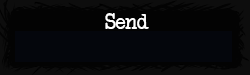
<style>
.page{position:relative;width:250px;height:75px;background:#04060c}
.page>*{position:absolute;margin:0}
.t1{font:20.8px "AnotherTypewriter";color:#ffffff}
</style>
<div class="page">
<p class="t1" style="left:105px;top:13px;width:44px;height:16px">Send</p>
</div>
